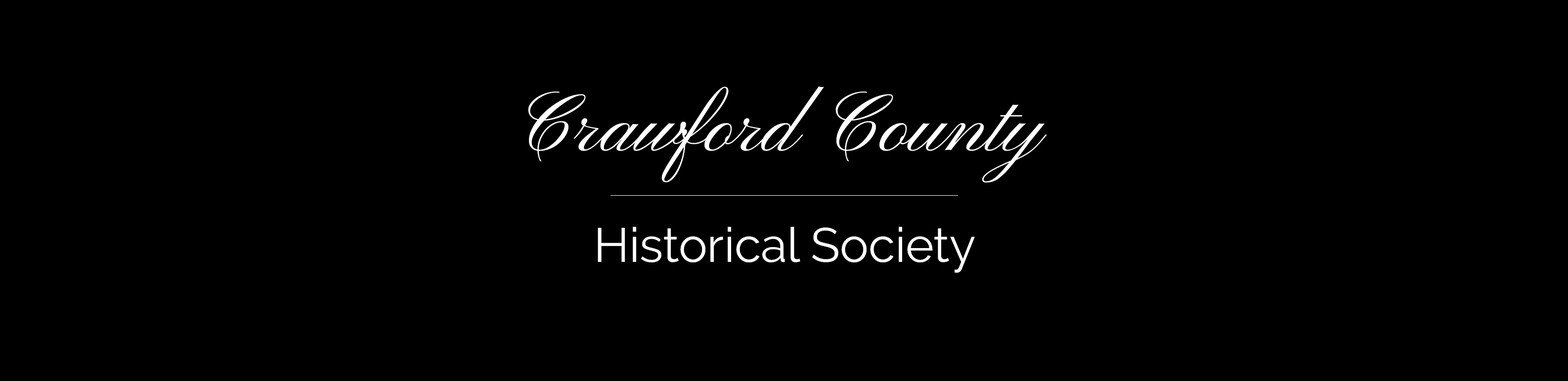
<style>
.page{position:relative;width:1568px;height:381px;background:#000000}
.page>*{position:absolute;margin:0}
.t1{font:82.4px "PinyonScript";color:#ffffff}
.t2{font:48.1px "Raleway-Regular";color:#ffffff}
</style>
<div class="page">
<p class="t1" style="left:528px;top:87px;width:519px;height:96px">Crawford County</p>
<p class="t2" style="left:598px;top:227px;width:377px;height:46px">Historical Society</p>
</div>
